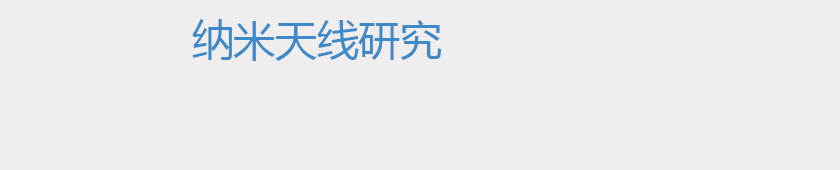
<style>
.page{position:relative;width:840px;height:170px;background:#efeded}
.page>*{position:absolute;margin:0}
.t1{font:41.7px "MicrosoftYaHei";color:#3e89c8}
</style>
<div class="page">
<p class="t1" style="left:192px;top:19px;width:250px;height:42px">纳米天线研究</p>
</div>
